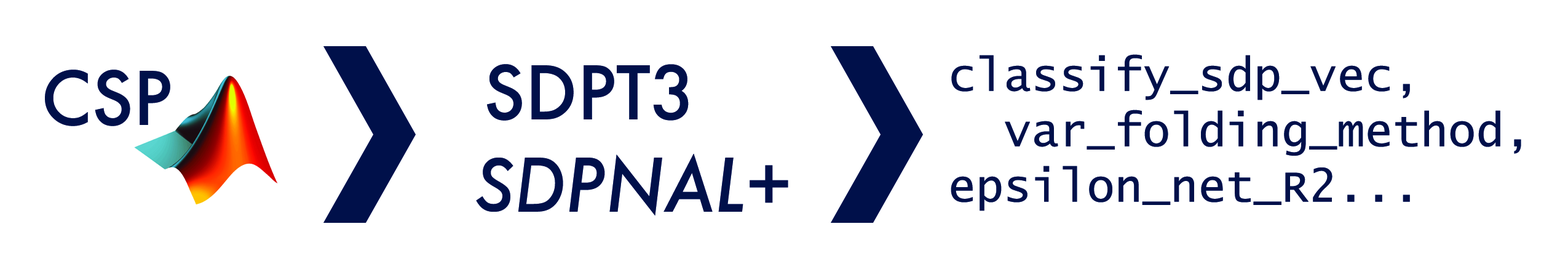
<style>
.page{position:relative;width:1568px;height:277px;background:#ffffff}
.page>*{position:absolute;margin:0}
.t1{font:71.7px "Futura-Medium";color:#001049}
.t2{font:46.1px "LucidaConsole";color:#001049}
.t3{font:71.7px "Futura-MediumItalic";color:#001049}
</style>
<div class="page">
<p class="t1" style="left:487px;top:64px;width:202px;height:57px">SDPT3</p>
<p class="t2" style="left:951px;top:54px;width:570px;height:157px">classify_sdp_vec,<br>  var_folding_method,<br>epsilon_net_R2...</p>
<p class="t1" style="left:45px;top:69px;width:125px;height:57px">CSP</p>
<p class="t3" style="left:476px;top:153px;width:312px;height:63px">SDPNAL+</p>
</div>
